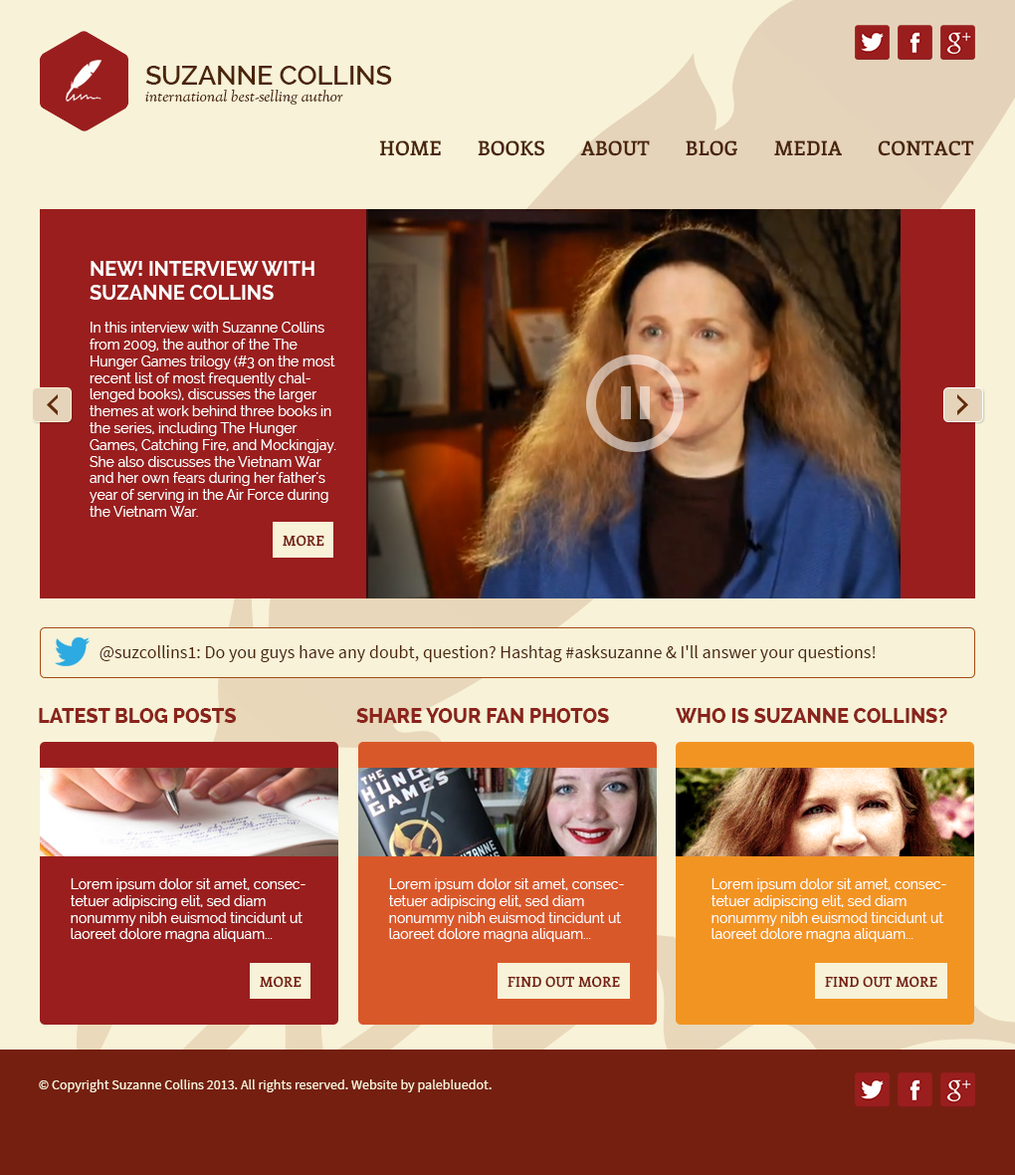
<style>
.page{position:relative;width:1015px;height:1175px;background:#f7f2d8}
.page>*{position:absolute;margin:0}
.t1{font:26.6px "Raleway-SemiBold";color:#4b2509;text-transform:uppercase}
.t2{font:15.9px "GoudyStM-Italic";color:#4b2509}
.t3{font:19.9px "Enriqueta-Bold";color:#4b2509;text-transform:uppercase}
.t4{font:19.9px "Raleway-Bold";color:#ffffff;text-transform:uppercase}
.t5{font:13.9px "Raleway";color:#ffffff}
.t6{font:13.9px "Enriqueta-Bold";color:#751f10}
.t7{font:17.9px "SourceSansPro-Regular";color:#4b2509}
.t8{font:19.9px "Raleway-ExtraBold";color:#8a241c;text-transform:uppercase}
.t9{font:13.9px "Raleway";color:#fefefe}
.t10{font:13.9px "SourceSansPro-Regular";color:#f7f2d8}
</style>
<div class="page">
<p class="t1" style="left:145px;top:66px;width:247px;height:19px">Suzanne Collins</p>
<p class="t2" style="left:145px;top:89px;width:198px;height:16px">international best-selling author</p>
<p class="t3" style="left:380px;top:140px;width:594px;height:16px">HOME       BOOKS       ABOUT       blog       media       CONTACT</p>
<p class="t4" style="left:90px;top:261px;width:225px;height:39px">New! INTERVIEW WITH <br>SUZANNE COLLINS</p>
<p class="t5" style="left:90px;top:321px;width:246px;height:196px">In this interview with Suzanne Collins from 2009, the author of the The Hunger Games trilogy (#3 on the most recent list of most frequently challenged books), discusses the larger themes at work behind three books in the series, including The Hunger Games, Catching Fire, and Mockingjay. She also discusses the Vietnam War and her own fears during her father's year of serving in the Air Force during the Vietnam War.</p>
<p class="t6" style="left:283px;top:535px;width:41px;height:11px">MORE</p>
<p class="t7" style="left:100px;top:645px;width:776px;height:17px">@suzcollins1: Do you guys have any doubt, question? Hashtag #asksuzanne &amp; I'll answer your questions!</p>
<p class="t8" style="left:39px;top:708px;width:197px;height:15px">latest blog posts</p>
<p class="t8" style="left:356px;top:708px;width:253px;height:15px">SHARE YOUR fan photos</p>
<p class="t8" style="left:675px;top:708px;width:273px;height:15px">Who is suzanne collins?</p>
<p class="t5" style="left:71px;top:878px;width:235px;height:64px">Lorem ipsum dolor sit amet, consectetuer adipiscing elit, sed diam nonummy nibh euismod tincidunt ut laoreet dolore magna aliquam...</p>
<p class="t5" style="left:389px;top:878px;width:235px;height:64px">Lorem ipsum dolor sit amet, consectetuer adipiscing elit, sed diam nonummy nibh euismod tincidunt ut laoreet dolore magna aliquam...</p>
<p class="t9" style="left:712px;top:878px;width:235px;height:64px">Lorem ipsum dolor sit amet, consectetuer adipiscing elit, sed diam nonummy nibh euismod tincidunt ut laoreet dolore magna aliquam...</p>
<p class="t6" style="left:260px;top:975px;width:42px;height:12px">MORE</p>
<p class="t6" style="left:508px;top:975px;width:112px;height:12px">FIND OUT MORE</p>
<p class="t6" style="left:825px;top:975px;width:113px;height:12px">FIND OUT MORE</p>
<p class="t10" style="left:39px;top:1079px;width:453px;height:13px">© Copyright Suzanne Collins 2013. All rights reserved. Website by palebluedot.</p>
</div>
